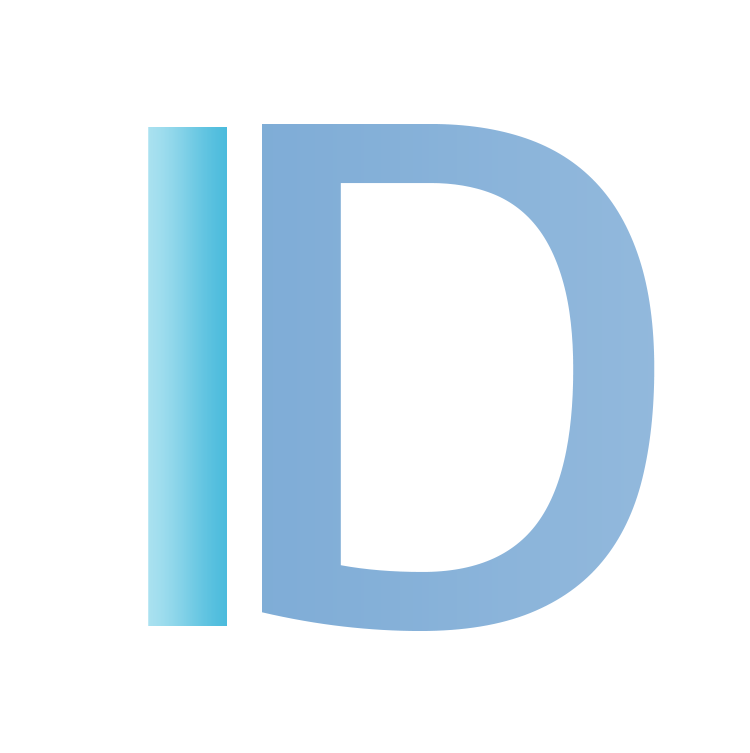
<style>
.page{position:relative;width:750px;height:753px;background:#ffffff}
.page>*{position:absolute;margin:0}
.t1{font:750px "3ds";letter-spacing:-0.05em;color:#91b8dc}
</style>
<div class="page">
<p class="t1" style="left:262px;top:124px;width:393px;height:507px">D</p>
</div>
